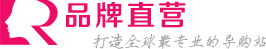
<style>
.page{position:relative;width:266px;height:49px;background:#ffffff}
.page>*{position:absolute;margin:0}
.t1{font:28.7px "FZZZHONGJW--GB1-0";letter-spacing:0.1em;color:#ed0c66}
.t2{font:16px "FZSJSK--GBK1-0";color:#838383;font-style:italic}
</style>
<div class="page">
<p class="t1" style="left:66px;top:1px;width:120px;height:27px">品牌直营</p>
<p class="t2" style="left:93px;top:33px;width:174px;height:16px">打造全球最专业的导购站</p>
</div>
